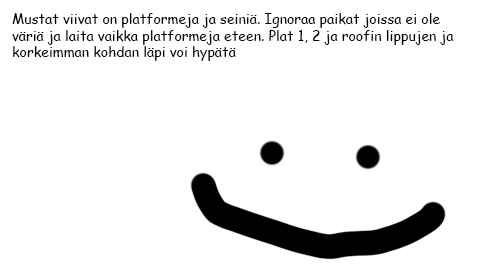
<style>
.page{position:relative;width:500px;height:268px;background:#ffffff}
.page>*{position:absolute;margin:0}
.t1{font:14px "ComicSansMS";color:#000000}
</style>
<div class="page">
<p class="t1" style="left:12px;top:13px;width:442px;height:48px">Mustat viivat on platformeja ja seiniä. Ignoraa paikat joissa ei ole väriä ja laita vaikka platformeja eteen. Plat 1, 2 ja roofin lippujen ja korkeimman kohdan läpi voi hypätä</p>
</div>
